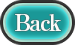
<style>
.page{position:relative;width:75px;height:45px}
.page>*{position:absolute;margin:0}
.t1{font:22px "RyuminPro-ExBold";letter-spacing:-0.08em;color:#fdfbf9}
</style>
<div class="page">
<p class="t1" style="left:15px;top:14px;width:46px;height:17px">Back</p>
</div>
